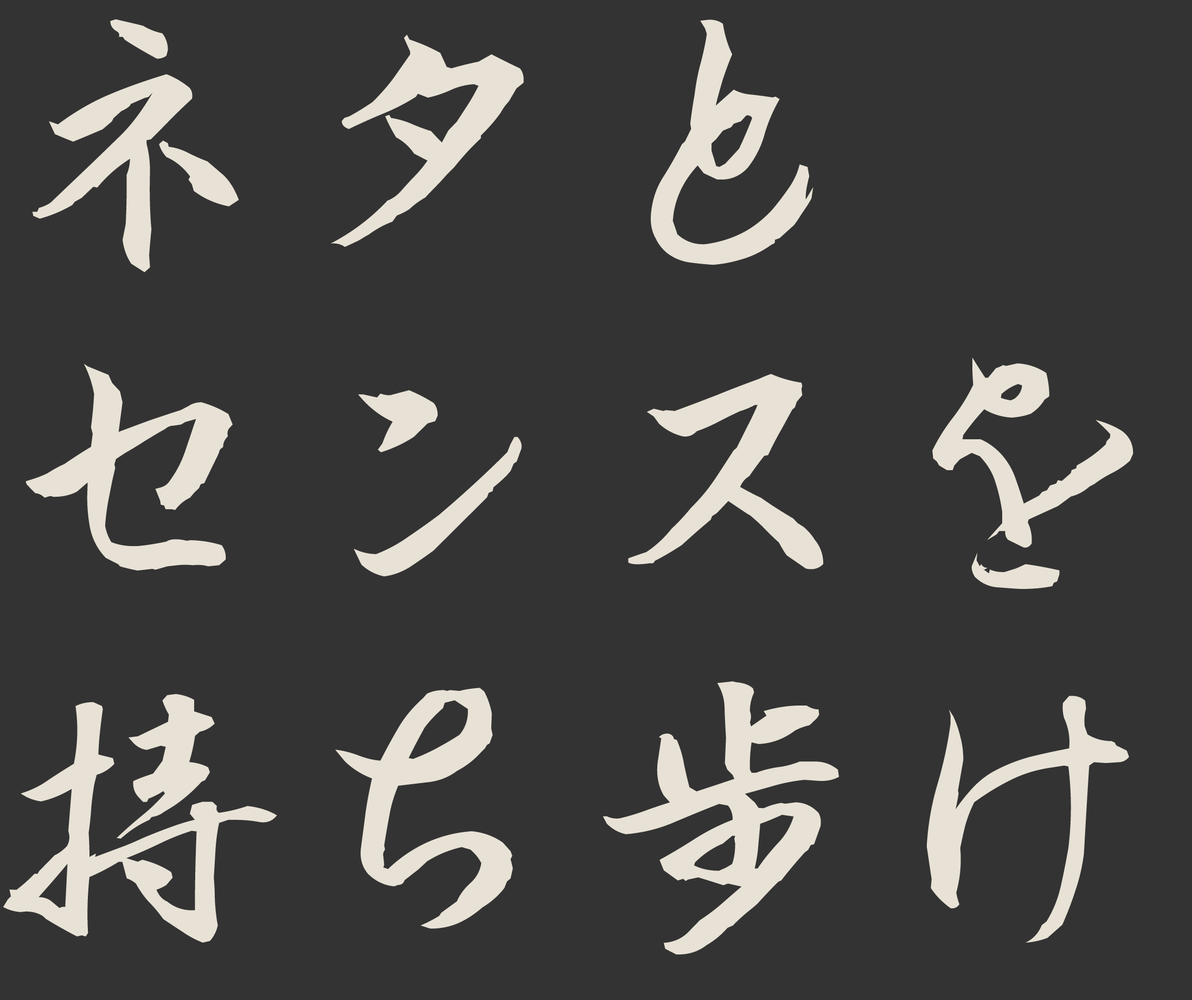
<style>
.page{position:relative;width:1192px;height:1000px;background:#333333}
.page>*{position:absolute;margin:0}
.t1{font:280.2px "SicYubi-MohitsuGyosho";letter-spacing:0.05em;color:#e8e2d6;font-variant:small-caps}
</style>
<div class="page">
<p class="t1" style="left:3px;top:19px;width:1131px;height:936px">ネタと<br>センスを<br>持ち歩け</p>
</div>
